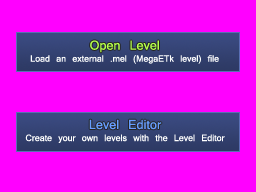
<style>
.page{position:relative;width:256px;height:192px;background:#ff00ff}
.page>*{position:absolute;margin:0}
.t1{font:14px/6px "Kartika"}
.t2{font:20px/6px "Kartika"}
.t3{font:20px "Kartika";color:#b5ff4c}
.t4{font:20px "Kartika";color:#679dff}
</style>
<div class="page">
<p class="t1" style="left:30px;top:40px;width:189px;height:24px;text-align:center"><span class="t2">Open Level<br><br></span>Load an external .mel (MegaETk level) file</p>
<p class="t3" style="left:90px;top:40px;width:69px;height:13px">Open Level</p>
<p class="t1" style="left:25px;top:119px;width:200px;height:24px;text-align:center"><span class="t2">Level Editor<br><br></span>Create your own levels with the Level Editor</p>
<p class="t4" style="left:89px;top:119px;width:73px;height:11px">Level Editor</p>
</div>
